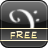
<style>
.page{position:relative;width:48px;height:48px}
.page>*{position:absolute;margin:0}
.t1{font:13px "RedStateBlueStateBB";letter-spacing:0.075em}
</style>
<div class="page">
<p class="t1" style="left:10px;top:31px;width:27px;height:8px">FREE</p>
</div>
